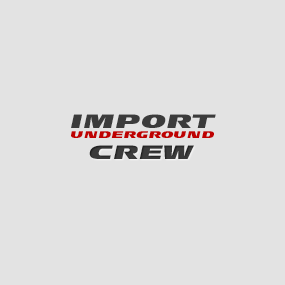
<style>
.page{position:relative;width:285px;height:285px;background:#e3e3e3}
.page>*{position:absolute;margin:0}
.t1{font:8.4px "MaximumLineSpeeder";color:#bf0101}
.t2{font:16.7px "MaximumLineSpeeder";color:#3b3b3b}
</style>
<div class="page">
<p class="t1" style="left:71px;top:114px;width:145px;height:24px"><span class="t2">IMPORT<br></span>UNDERGROUND</p>
<p class="t2" style="left:89px;top:145px;width:105px;height:14px">CREW</p>
</div>
